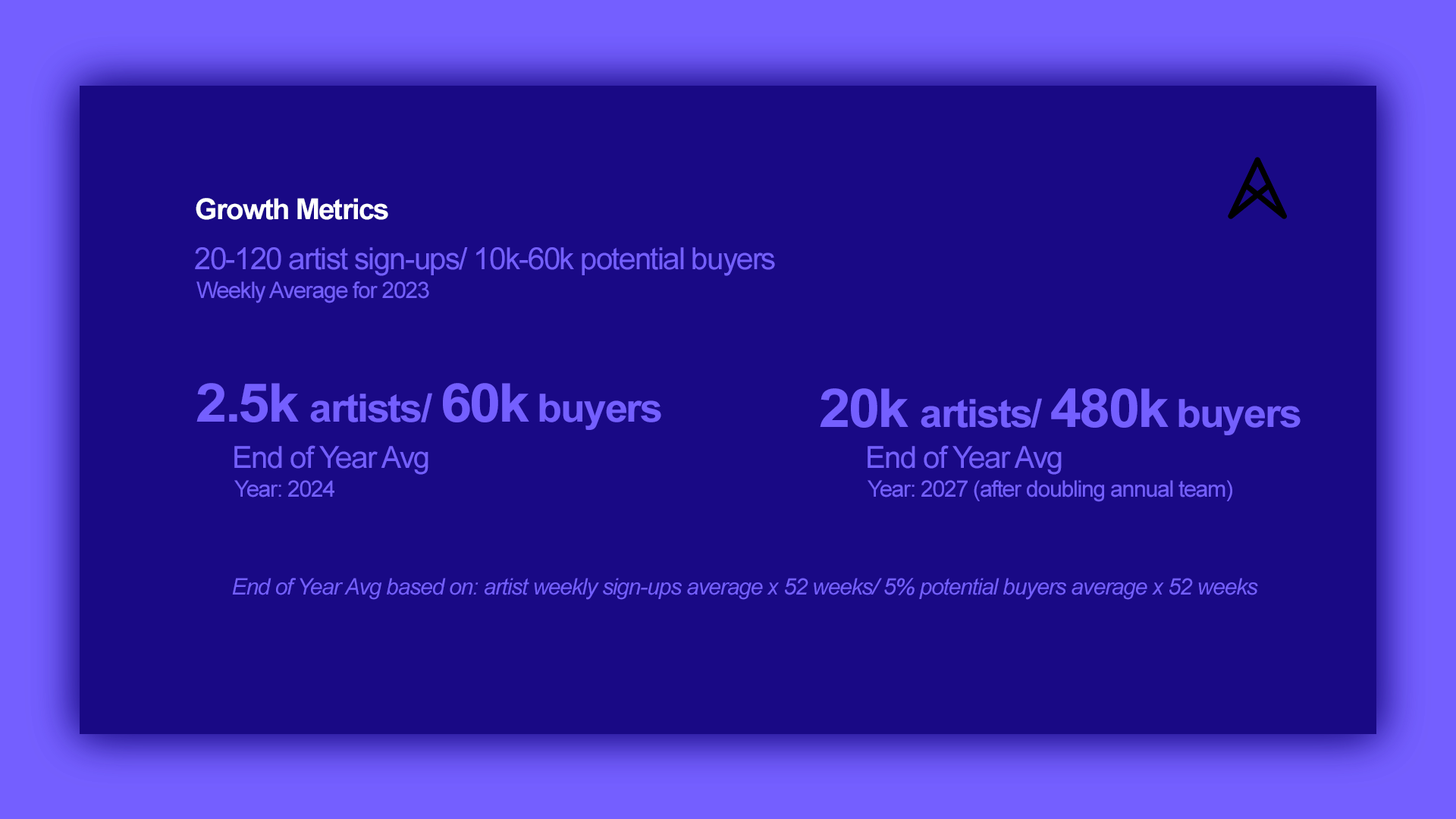
<style>
.page{position:relative;width:1456px;height:819px;background:#190985}
.page>*{position:absolute;margin:0}
.t1{font:28.8px "Arial-BoldMT";letter-spacing:-0.04em;color:#feffff}
.t2{font:30.3px "ArialMT";letter-spacing:-0.04em;color:#745fff}
.t3{font:22.7px "ArialMT";letter-spacing:-0.04em;color:#745fff}
.t4{font:38.8px "Arial-BoldMT";letter-spacing:-0.04em;color:#745fff;scale:1.05 1}
.t5{font:53.4px "Arial-BoldMT";letter-spacing:-0.04em;color:#745fff;scale:1.05 1}
.t6{font:53.5px "Arial-BoldMT";letter-spacing:-0.04em;color:#745fff;scale:1.05 1}
.t7{font:22.7px "Arial-ItalicMT";letter-spacing:-0.04em;color:#745fff}
</style>
<div class="page">
<p class="t1" style="left:196px;top:198px;width:192px;height:22px">Growth Metrics</p>
<p class="t2" style="left:195px;top:247px;width:580px;height:29px">20-120 artist sign-ups/ 10k-60k potential buyers</p>
<p class="t3" style="left:196px;top:281px;width:233px;height:22px">Weekly Average for 2023</p>
<p class="t4" style="left:196px;top:383px;width:465px;height:47px"><span class="t5">2.5k </span>artists/ <span class="t6">60k</span> buyers</p>
<p class="t4" style="left:820px;top:388px;width:481px;height:47px"><span class="t5">20k </span>artists/ <span class="t6">480k</span> buyers</p>
<p class="t2" style="left:234px;top:445px;width:194px;height:30px">End of Year Avg</p>
<p class="t2" style="left:868px;top:445px;width:194px;height:30px">End of Year Avg</p>
<p class="t3" style="left:234px;top:480px;width:100px;height:17px">Year: 2024</p>
<p class="t3" style="left:868px;top:480px;width:364px;height:22px">Year: 2027 (after doubling annual team)</p>
<p class="t7" style="left:232px;top:578px;width:1026px;height:22px">End of Year Avg based on: artist weekly sign-ups average x 52 weeks/ 5% potential buyers average x 52 weeks</p>
</div>
